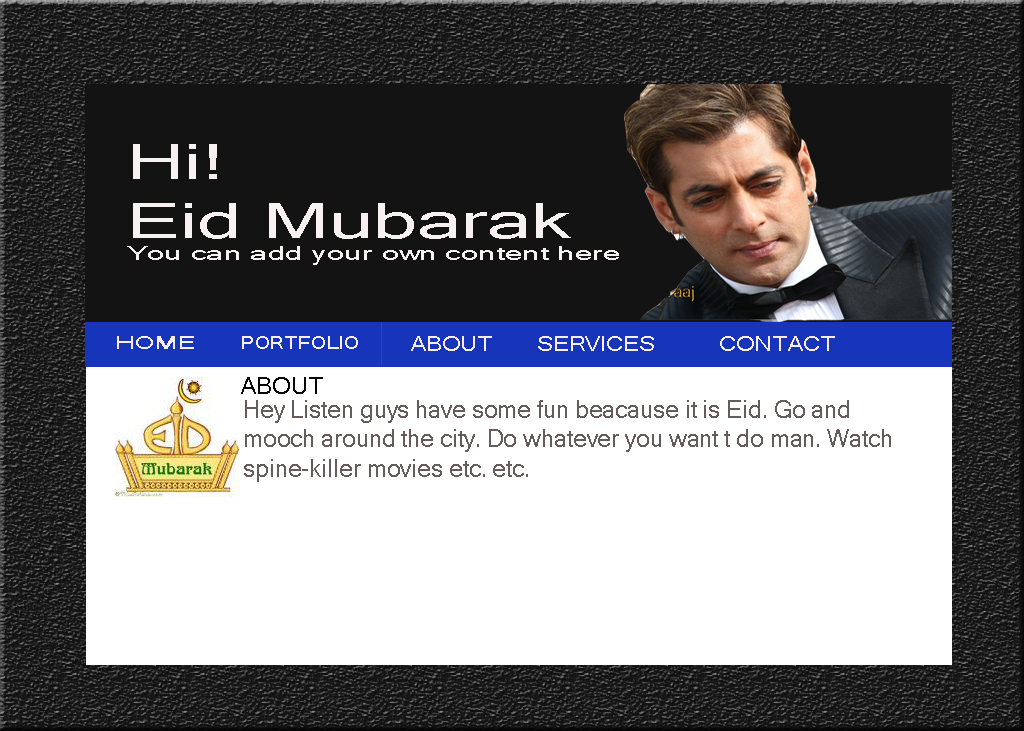
<style>
.page{position:relative;width:1024px;height:731px;background:#ffffff}
.page>*{position:absolute;margin:0}
.t1{font:19px "MicrosoftSansSerif";color:#f8f1f1;scale:1.62 1}
.t2{font:48.9px "MicrosoftSansSerif";color:#f8f1f1;scale:1.62 1}
.t3{font:18px "MicrosoftSansSerif";color:#f9eeee;scale:1.51 1}
.t4{font:18px "MicrosoftSansSerif";color:#675c5c;scale:1.51 1}
.t5{font:18px "MicrosoftSansSerif";color:#f9eeee;scale:1.17 1}
.t6{font:20.4px "MicrosoftSansSerif";color:#675c5c;scale:1.17 1}
.t7{font:20.4px "MicrosoftSansSerif";color:#f9eeee;scale:1.17 1}
.t8{font:24px "MicrosoftSansSerif";color:#060606}
.t9{font:24px "MicrosoftSansSerif";color:#675c5c}
.t10{font:24.6px "MicrosoftSansSerif";color:#675c5c;scale:0.97 1}
</style>
<div class="page">
<p class="t1" style="left:127px;top:144px;width:492px;height:121px"><span class="t2">Hi!<br>Eid Mubarak<br></span>You can add your own content here</p>
<p class="t3" style="left:117px;top:336px;width:77px;height:13px"><span class="t4">     <br></span><br><br>     HOME</p>
<p class="t5" style="left:242px;top:336px;width:116px;height:13px"><span class="t6">     <br><br><br>     </span>PORTFOLIO</p>
<p class="t7" style="left:411px;top:336px;width:81px;height:15px"><span class="t6">     <br></span><br><br>     ABOUT</p>
<p class="t7" style="left:538px;top:336px;width:116px;height:15px"><span class="t6">     <br></span><br><br>     SERVICES</p>
<p class="t7" style="left:720px;top:336px;width:115px;height:15px"><span class="t6">     <br></span><br><br>     CONTACT</p>
<p class="t8" style="left:241px;top:377px;width:82px;height:17px"><span class="t9">   </span>ABOUT</p>
<p class="t10" style="left:244px;top:400px;width:647px;height:82px">Hey Listen guys have some fun beacause it is Eid. Go and mooch around the city. Do whatever you want t do man. Watch spine-killer movies etc. etc.</p>
</div>
